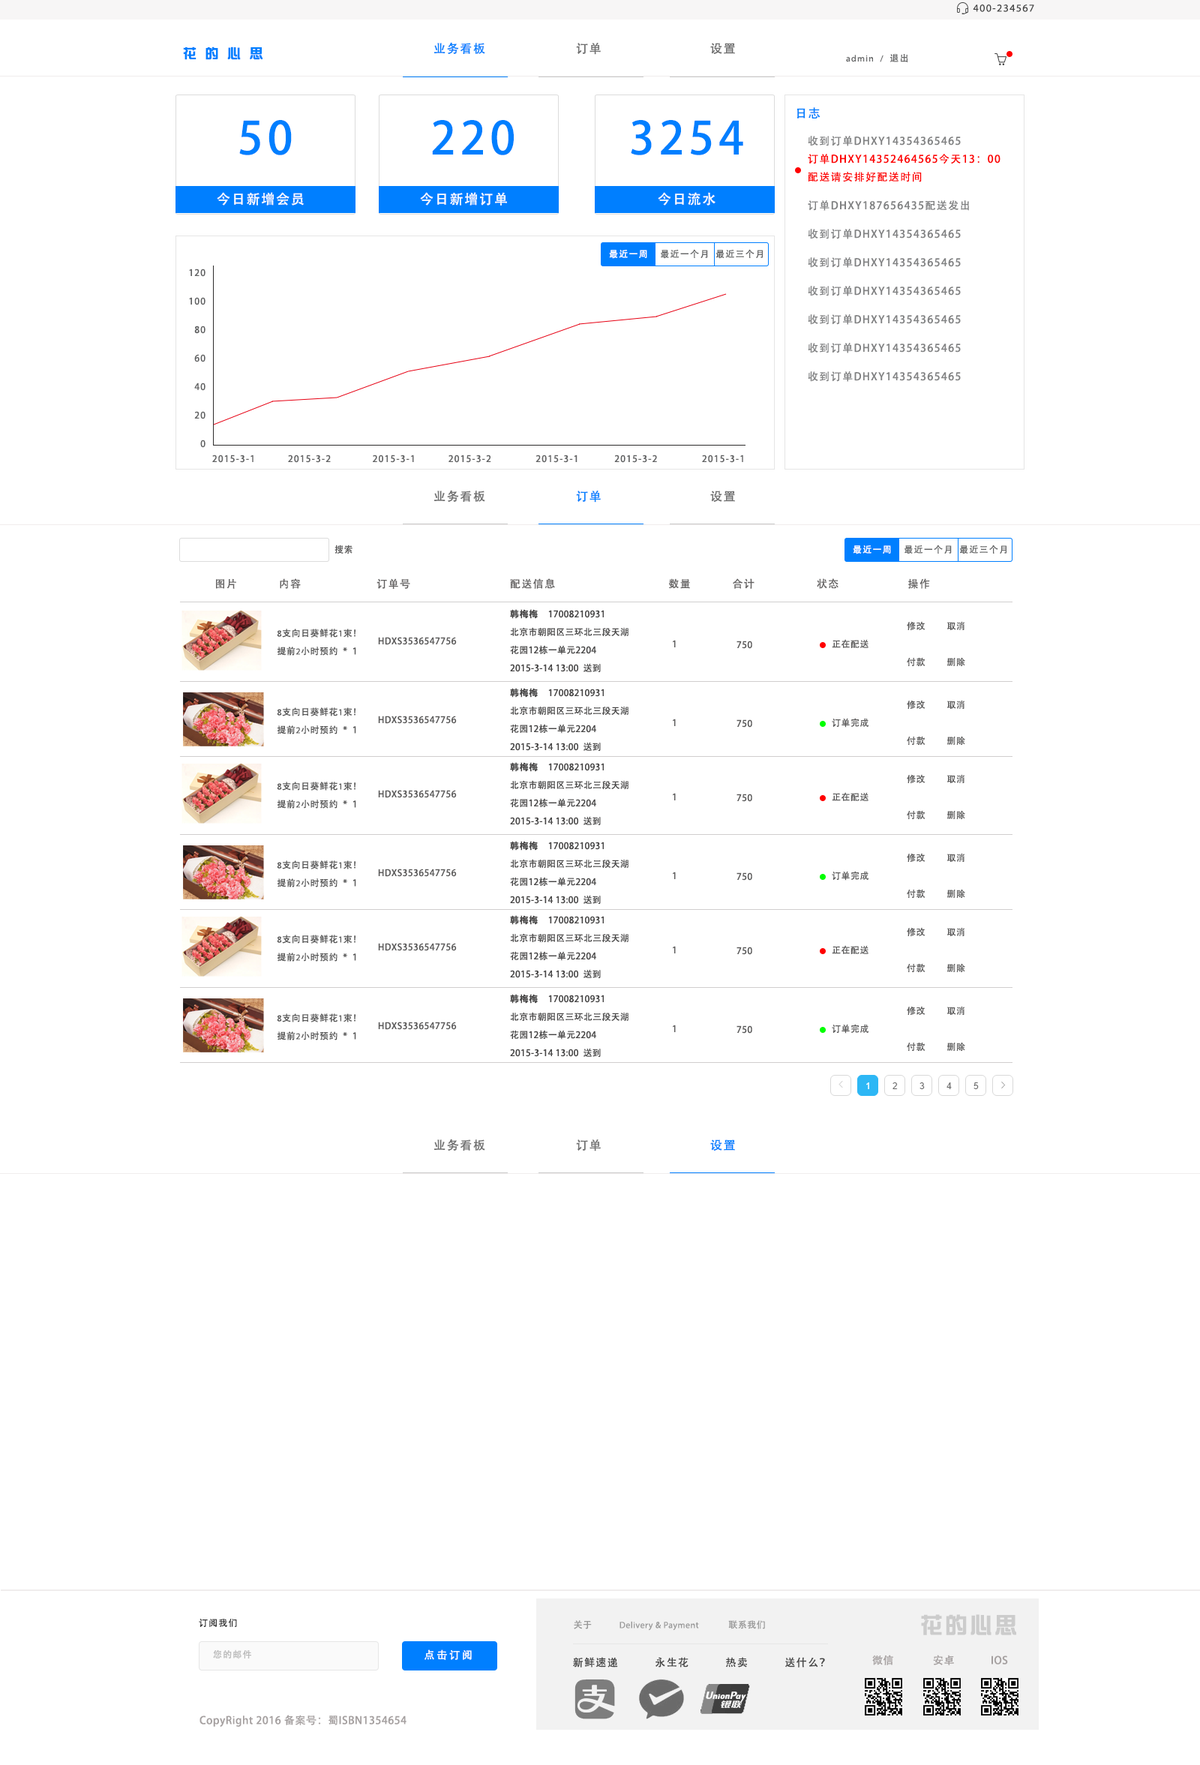
<style>
.page{position:relative;width:1200px;height:1765px;background:#ffffff}
.page>*{position:absolute;margin:0}
.t1{font:10.5px "MyriadPro-Regular";letter-spacing:0.1em;color:#444444}
.t2{font:13.5px "DFZongYi-Bd-80-Win-GB";letter-spacing:0.64em;color:#007fff}
.t3{font:12px "AdobeHeitiStd-Regular";letter-spacing:0.1em;color:#007fff}
.t4{font:12px "AdobeHeitiStd-Regular";letter-spacing:0.1em;color:#6e6e6e}
.t5{font:9px "MyriadPro-Regular";letter-spacing:0.1em;color:#646566}
.t6{font:9px "AdobeHeitiStd-Regular";letter-spacing:0.1em;color:#646566}
.t7{font:45px "AdobeHeitiStd-Regular";letter-spacing:0.1em;color:#007fff}
.t8{font:10.5px/28.5px "AdobeHeitiStd-Regular";letter-spacing:0.1em;color:#818283}
.t9{font:10.5px/18px "AdobeHeitiStd-Regular";letter-spacing:0.1em;color:#fd0101}
.t10{font:13.5px "AdobeHeitiStd-Regular";letter-spacing:0.1em;color:#fbfdfe}
.t11{font:9px "AdobeHeitiStd-Regular";letter-spacing:0.1em;color:#feffff}
.t12{font:9px/28.5px "AdobeHeitiStd-Regular";letter-spacing:0.1em;color:#636465}
.t13{font:9px "AdobeHeitiStd-Regular";letter-spacing:0.1em;color:#636465}
.t14{font:9px "AdobeHeitiStd-Regular";letter-spacing:0.04em;color:#5b5a5a}
.t15{font:10.5px "AdobeHeitiStd-Regular";letter-spacing:0.1em;color:#636161}
.t16{font:9px/18px "AdobeHeitiStd-Regular";letter-spacing:0.02em;color:#464545}
.t17{font:9px/18px "AdobeHeitiStd-Regular";letter-spacing:0.02em;color:#464545;font-weight:bold}
.t18{font:9px/18px "AdobeHeitiStd-Regular";letter-spacing:0.04em;color:#555555}
.t19{font:9px/18px "MyriadPro-Regular";letter-spacing:0.04em;color:#555555}
.t20{font:9px/18px "AdobeHeitiStd-Regular";letter-spacing:0.04em;color:#5b5a5a}
.t21{font:22.5px "DFZongYi-Bd-80-Win-GB";letter-spacing:0.1em;color:#cccccc}
.t22{font:9px "AdobeHeitiStd-Regular";letter-spacing:0.1em;color:#333333;text-transform:uppercase}
.t23{font:9px "MyriadPro-Regular";letter-spacing:0.04em;color:#999999}
.t24{font:9px "AdobeHeitiStd-Regular";letter-spacing:0.04em;color:#999999}
.t25{font:9px "AdobeHeitiStd-Regular";letter-spacing:0.1em;color:#bbbbbb}
.t26{font:10.5px "AdobeHeitiStd-Regular";letter-spacing:0.2em;color:#ffffff;text-transform:uppercase}
.t27{font:10.5px "AdobeHeitiStd-Regular";letter-spacing:0.1em;color:#444444}
.t28{font:10.5px "AdobeHeitiStd-Regular";letter-spacing:0.04em;color:#a5a0a0}
</style>
<div class="page">
<p class="t1" style="left:973px;top:4px;width:61px;height:8px">400-234567</p>
<p class="t2" style="left:183px;top:46px;width:79px;height:14px">花的心思</p>
<p class="t3" style="left:434px;top:42px;width:51px;height:12px">业务看板</p>
<p class="t4" style="left:576px;top:43px;width:25px;height:12px">订单</p>
<p class="t4" style="left:710px;top:43px;width:25px;height:11px">设置</p>
<p class="t5" style="left:846px;top:54px;width:62px;height:8px">admin  /  <span class="t6">退出</span></p>
<p class="t3" style="left:797px;top:107px;width:23px;height:11px">日志</p>
<p class="t7" style="left:239px;top:120px;width:53px;height:35px">50</p>
<p class="t7" style="left:432px;top:120px;width:82px;height:35px">220</p>
<p class="t7" style="left:631px;top:120px;width:112px;height:35px">3254</p>
<p class="t8" style="left:808px;top:136px;width:192px;height:246px">收到订单DHXY14354365465<br><span class="t9">订单DHXY14352464565今天13：00<br>配送请安排好配送时间<br></span>订单DHXY187656435配送发出<br>收到订单DHXY14354365465<br>收到订单DHXY14354365465<br>收到订单DHXY14354365465<br>收到订单DHXY14354365465<br>收到订单DHXY14354365465<br>收到订单DHXY14354365465</p>
<p class="t10" style="left:217px;top:192px;width:87px;height:14px">今日新增会员</p>
<p class="t10" style="left:420px;top:192px;width:87px;height:14px">今日新增订单</p>
<p class="t10" style="left:658px;top:192px;width:58px;height:14px">今日流水</p>
<p class="t6" style="left:609px;top:249px;width:154px;height:10px"><span class="t11">最近一周    </span>最近一个月  最近三个月</p>
<p class="t12" style="left:189px;top:268px;width:17px;height:180px;text-align:right">120<br>100<br>80<br>60<br>40<br>20<br>0</p>
<p class="t13" style="left:212px;top:454px;width:531px;height:9px">2015-3-1           2015-3-2              2015-3-1           2015-3-2               2015-3-1            2015-3-2               2015-3-1</p>
<p class="t4" style="left:434px;top:490px;width:51px;height:12px">业务看板</p>
<p class="t3" style="left:576px;top:490px;width:25px;height:12px">订单</p>
<p class="t4" style="left:710px;top:490px;width:25px;height:12px">设置</p>
<p class="t14" style="left:334px;top:544px;width:18px;height:10px">搜索</p>
<p class="t6" style="left:853px;top:544px;width:153px;height:10px"><span class="t11">最近一周    </span>最近一个月  最近三个月</p>
<p class="t15" style="left:216px;top:578px;width:714px;height:11px">图片            内容                      订单号                             配送信息                                 数量            合计                  状态                    操作</p>
<p class="t16" style="left:510px;top:609px;width:118px;height:63px"><span class="t17">韩梅梅    </span>17008210931<br>北京市朝阳区三环北三段天湖<br>花园12栋一单元2204<br>2015-3-14 13:00  送到</p>
<p class="t18" style="left:277px;top:628px;width:79px;height:28px"><span class="t19">8</span>支向日葵鲜花<span class="t19">1</span>束！<br>提前<span class="t19">2</span>小时预约  *  1</p>
<p class="t20" style="left:907px;top:621px;width:58px;height:45px">修改         取消<br><br>付款         删除</p>
<p class="t14" style="left:378px;top:637px;width:79px;height:8px">HDXS3536547756</p>
<p class="t14" style="left:673px;top:640px;width:3px;height:7px">1</p>
<p class="t14" style="left:736px;top:640px;width:16px;height:9px">750</p>
<p class="t14" style="left:832px;top:639px;width:36px;height:9px">正在配送</p>
<p class="t16" style="left:510px;top:688px;width:118px;height:63px"><span class="t17">韩梅梅    </span>17008210931<br>北京市朝阳区三环北三段天湖<br>花园12栋一单元2204<br>2015-3-14 13:00  送到</p>
<p class="t20" style="left:907px;top:700px;width:58px;height:45px">修改         取消<br><br>付款         删除</p>
<p class="t18" style="left:277px;top:707px;width:79px;height:27px"><span class="t19">8</span>支向日葵鲜花<span class="t19">1</span>束！<br>提前<span class="t19">2</span>小时预约  *  1</p>
<p class="t14" style="left:378px;top:716px;width:79px;height:8px">HDXS3536547756</p>
<p class="t14" style="left:673px;top:718px;width:3px;height:8px">1</p>
<p class="t14" style="left:736px;top:719px;width:16px;height:9px">750</p>
<p class="t14" style="left:832px;top:718px;width:36px;height:10px">订单完成</p>
<p class="t16" style="left:510px;top:762px;width:118px;height:63px"><span class="t17">韩梅梅    </span>17008210931<br>北京市朝阳区三环北三段天湖<br>花园12栋一单元2204<br>2015-3-14 13:00  送到</p>
<p class="t20" style="left:907px;top:774px;width:58px;height:45px">修改         取消<br><br>付款         删除</p>
<p class="t18" style="left:277px;top:782px;width:79px;height:26px"><span class="t19">8</span>支向日葵鲜花<span class="t19">1</span>束！<br>提前<span class="t19">2</span>小时预约  *  1</p>
<p class="t14" style="left:378px;top:790px;width:79px;height:8px">HDXS3536547756</p>
<p class="t14" style="left:673px;top:793px;width:3px;height:7px">1</p>
<p class="t14" style="left:736px;top:794px;width:16px;height:8px">750</p>
<p class="t14" style="left:832px;top:792px;width:36px;height:9px">正在配送</p>
<p class="t16" style="left:510px;top:841px;width:118px;height:63px"><span class="t17">韩梅梅    </span>17008210931<br>北京市朝阳区三环北三段天湖<br>花园12栋一单元2204<br>2015-3-14 13:00  送到</p>
<p class="t20" style="left:907px;top:853px;width:58px;height:45px">修改         取消<br><br>付款         删除</p>
<p class="t18" style="left:277px;top:860px;width:79px;height:27px"><span class="t19">8</span>支向日葵鲜花<span class="t19">1</span>束！<br>提前<span class="t19">2</span>小时预约  *  1</p>
<p class="t14" style="left:378px;top:868px;width:79px;height:9px">HDXS3536547756</p>
<p class="t14" style="left:673px;top:872px;width:3px;height:7px">1</p>
<p class="t14" style="left:736px;top:872px;width:16px;height:8px">750</p>
<p class="t14" style="left:832px;top:871px;width:36px;height:9px">订单完成</p>
<p class="t16" style="left:510px;top:915px;width:118px;height:63px"><span class="t17">韩梅梅    </span>17008210931<br>北京市朝阳区三环北三段天湖<br>花园12栋一单元2204<br>2015-3-14 13:00  送到</p>
<p class="t20" style="left:907px;top:927px;width:58px;height:45px">修改         取消<br><br>付款         删除</p>
<p class="t18" style="left:277px;top:934px;width:79px;height:28px"><span class="t19">8</span>支向日葵鲜花<span class="t19">1</span>束！<br>提前<span class="t19">2</span>小时预约  *  1</p>
<p class="t14" style="left:378px;top:943px;width:79px;height:8px">HDXS3536547756</p>
<p class="t14" style="left:673px;top:946px;width:3px;height:7px">1</p>
<p class="t14" style="left:736px;top:946px;width:16px;height:9px">750</p>
<p class="t14" style="left:832px;top:945px;width:36px;height:9px">正在配送</p>
<p class="t16" style="left:510px;top:994px;width:118px;height:63px"><span class="t17">韩梅梅    </span>17008210931<br>北京市朝阳区三环北三段天湖<br>花园12栋一单元2204<br>2015-3-14 13:00  送到</p>
<p class="t18" style="left:277px;top:1013px;width:79px;height:27px"><span class="t19">8</span>支向日葵鲜花<span class="t19">1</span>束！<br>提前<span class="t19">2</span>小时预约  *  1</p>
<p class="t20" style="left:907px;top:1006px;width:58px;height:45px">修改         取消<br><br>付款         删除</p>
<p class="t14" style="left:378px;top:1022px;width:79px;height:8px">HDXS3536547756</p>
<p class="t14" style="left:673px;top:1024px;width:3px;height:8px">1</p>
<p class="t14" style="left:736px;top:1025px;width:16px;height:9px">750</p>
<p class="t14" style="left:832px;top:1024px;width:36px;height:10px">订单完成</p>
<p class="t4" style="left:434px;top:1138px;width:51px;height:12px">业务看板</p>
<p class="t4" style="left:576px;top:1139px;width:25px;height:12px">订单</p>
<p class="t3" style="left:710px;top:1139px;width:25px;height:11px">设置</p>
<p class="t21" style="left:921px;top:1614px;width:95px;height:21px">花的心思</p>
<p class="t22" style="left:199px;top:1618px;width:38px;height:9px">订阅我们</p>
<p class="t23" style="left:574px;top:1620px;width:191px;height:10px"><span class="t24">关于</span>            Delivery &amp; Payment             <span class="t24">联系我们</span></p>
<p class="t25" style="left:213px;top:1649px;width:38px;height:10px">您的邮件</p>
<p class="t26" style="left:424px;top:1649px;width:48px;height:11px">点击订阅</p>
<p class="t27" style="left:573px;top:1657px;width:252px;height:10px">新鲜速递           永生花           热卖           送什么？</p>
<p class="t28" style="left:872px;top:1654px;width:136px;height:11px">微信              安卓             IOS</p>
<p class="t28" style="left:200px;top:1714px;width:206px;height:12px">CopyRight 2016 备案号：蜀ISBN1354654</p>
</div>
